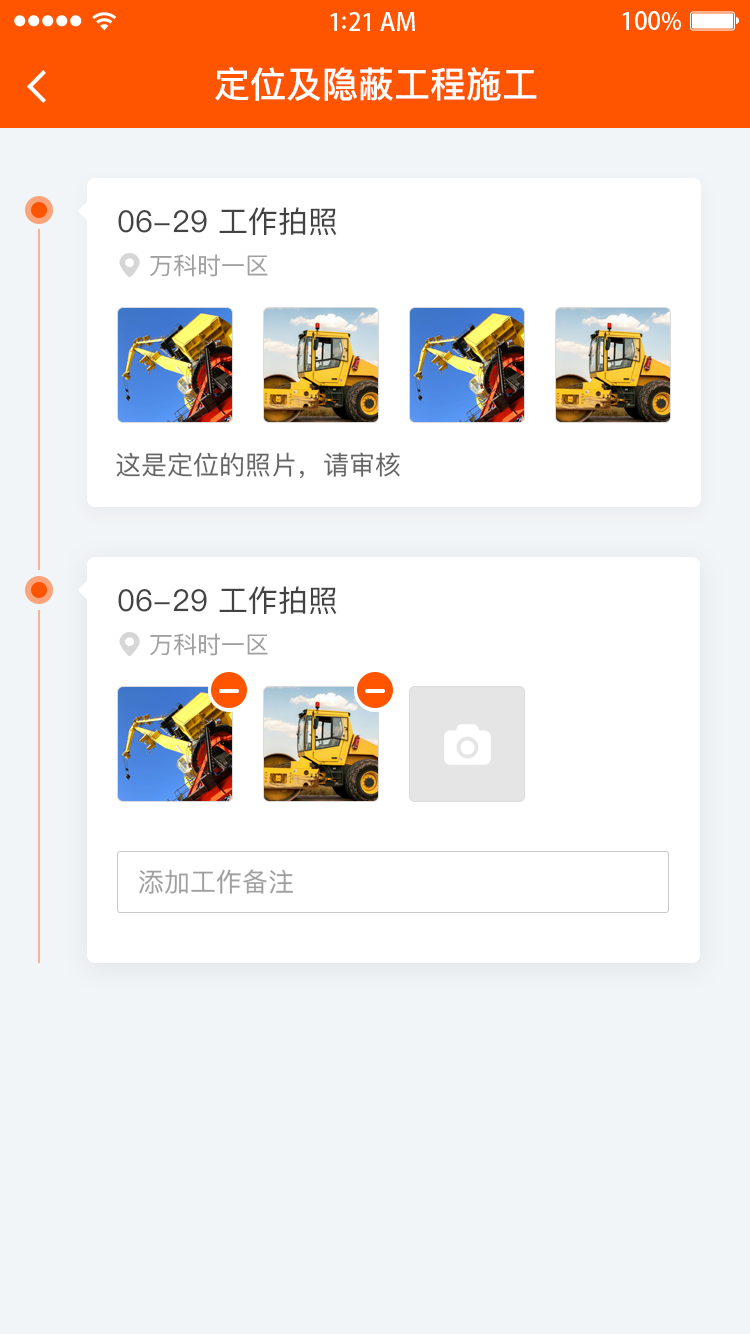
<style>
.page{position:relative;width:750px;height:1334px;background:#f2f5f7}
.page>*{position:absolute;margin:0}
.t1{font:36px "PingFangSC-Medium";color:#ffffff}
.t2{font:30px "PingFangSC-Regular";color:#434343}
.t3{font:24px "PingFangSC-Regular";color:#a0a0a0}
.t4{font:26px "PingFangSC-Regular";color:#666666}
.t5{font:26px "PingFangSC-Regular";color:#a0a0a0}
</style>
<div class="page">
<p class="t1" style="left:215px;top:67px;width:322px;height:34px">定位及隐蔽工程施工</p>
<p class="t2" style="left:118px;top:207px;width:219px;height:29px">06-29 工作拍照</p>
<p class="t3" style="left:150px;top:254px;width:118px;height:23px">万科时一区</p>
<p class="t4" style="left:116px;top:452px;width:284px;height:27px">这是定位的照片，请审核</p>
<p class="t2" style="left:118px;top:586px;width:219px;height:29px">06-29 工作拍照</p>
<p class="t3" style="left:150px;top:633px;width:118px;height:23px">万科时一区</p>
<p class="t5" style="left:139px;top:869px;width:154px;height:25px">添加工作备注</p>
</div>
